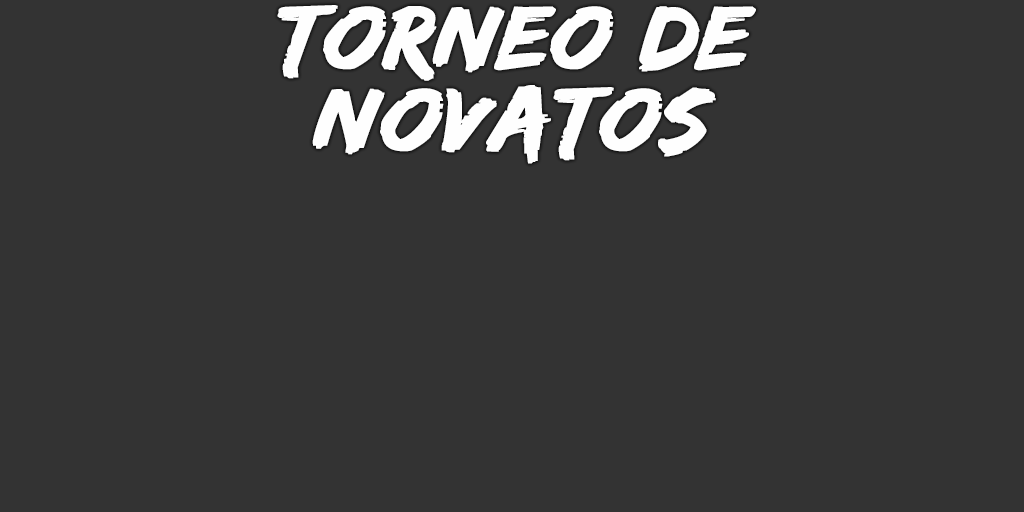
<style>
.page{position:relative;width:1024px;height:512px;background:#333333}
.page>*{position:absolute;margin:0}
.t1{font:93px/82px "EdoSZ";color:#fefefe;font-weight:bold;font-style:italic;scale:1.04 1}
</style>
<div class="page">
<p class="t1" style="left:277px;top:5px;width:479px;height:159px;text-align:center">torneo de<br>Novatos</p>
</div>
